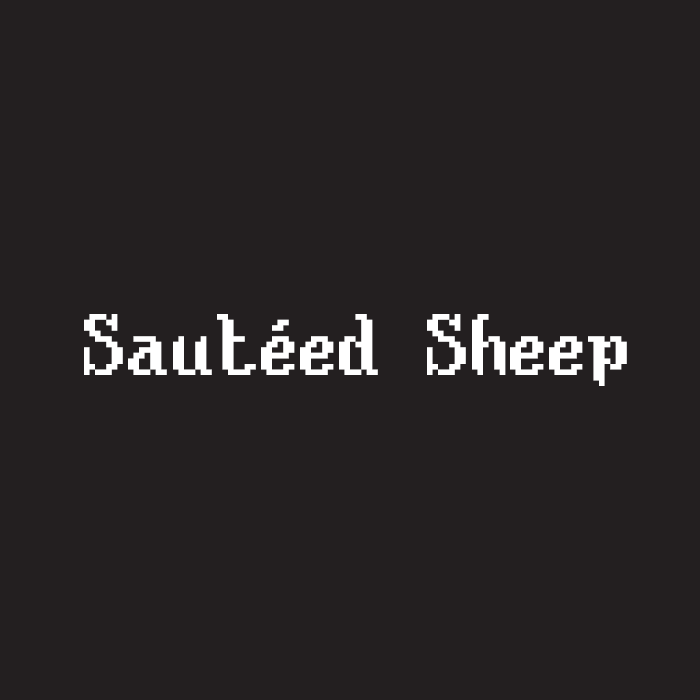
<style>
.page{position:relative;width:700px;height:700px;background:#231f20}
.page>*{position:absolute;margin:0}
.t1{font:72px "Gold-Box-8x16";color:#ffffff}
</style>
<div class="page">
<p class="t1" style="left:84px;top:314px;width:543px;height:72px">Sautéed Sheep</p>
</div>
